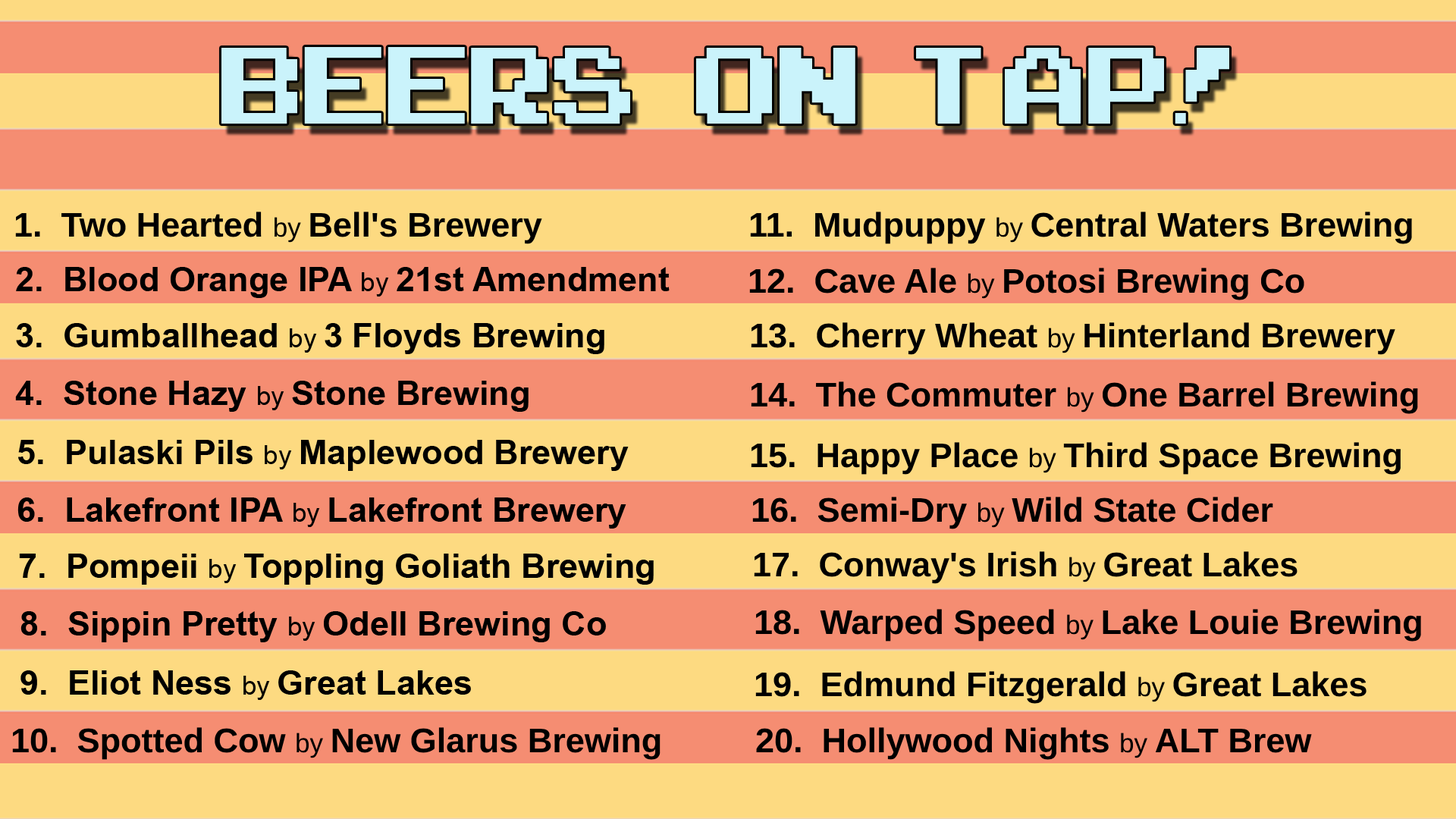
<style>
.page{position:relative;width:1456px;height:819px;background:#fdda81}
.page>*{position:absolute;margin:0}
.t1{font:34.1px "Arial-BoldMT";color:#000000}
.t2{font:26.5px "ArialMT";color:#000000}
</style>
<div class="page">
<p class="t1" style="left:15px;top:212px;width:527px;height:32px">1.  Two Hearted <span class="t2">by </span>Bell's Brewery</p>
<p class="t1" style="left:750px;top:212px;width:662px;height:32px">11.  Mudpuppy <span class="t2">by </span>Central Waters Brewing</p>
<p class="t1" style="left:16px;top:267px;width:654px;height:31px">2.  Blood Orange IPA <span class="t2">by </span>21st Amendment</p>
<p class="t1" style="left:749px;top:268px;width:555px;height:32px">12.  Cave Ale <span class="t2">by </span>Potosi Brewing Co</p>
<p class="t1" style="left:16px;top:323px;width:588px;height:31px">3.  Gumballhead <span class="t2">by </span>3 Floyds Brewing</p>
<p class="t1" style="left:751px;top:322px;width:644px;height:33px">13.  Cherry Wheat <span class="t2">by </span>Hinterland Brewery</p>
<p class="t1" style="left:15px;top:381px;width:514px;height:31px">4.  Stone Hazy <span class="t2">by </span>Stone Brewing</p>
<p class="t1" style="left:751px;top:381px;width:667px;height:33px">14.  The Commuter <span class="t2">by </span>One Barrel Brewing</p>
<p class="t1" style="left:18px;top:440px;width:611px;height:31px">5.  Pulaski Pils <span class="t2">by </span>Maplewood Brewery</p>
<p class="t1" style="left:751px;top:442px;width:650px;height:33px">15.  Happy Place <span class="t2">by </span>Third Space Brewing</p>
<p class="t1" style="left:17px;top:497px;width:609px;height:32px">6.  Lakefront IPA <span class="t2">by </span>Lakefront Brewery</p>
<p class="t1" style="left:752px;top:497px;width:521px;height:32px">16.  Semi-Dry <span class="t2">by </span>Wild State Cider</p>
<p class="t1" style="left:19px;top:554px;width:635px;height:31px">7.  Pompeii <span class="t2">by </span>Toppling Goliath Brewing</p>
<p class="t1" style="left:754px;top:551px;width:543px;height:33px">17.  Conway's Irish <span class="t2">by </span>Great Lakes</p>
<p class="t1" style="left:20px;top:611px;width:586px;height:31px">8.  Sippin Pretty <span class="t2">by </span>Odell Brewing Co</p>
<p class="t1" style="left:755px;top:609px;width:666px;height:33px">18.  Warped Speed <span class="t2">by </span>Lake Louie Brewing</p>
<p class="t1" style="left:20px;top:670px;width:451px;height:30px">9.  Eliot Ness <span class="t2">by </span>Great Lakes</p>
<p class="t1" style="left:755px;top:671px;width:611px;height:33px">19.  Edmund Fitzgerald <span class="t2">by </span>Great Lakes</p>
<p class="t1" style="left:12px;top:727px;width:648px;height:33px">10.  Spotted Cow <span class="t2">by </span>New Glarus Brewing</p>
<p class="t1" style="left:756px;top:727px;width:556px;height:33px">20.  Hollywood Nights <span class="t2">by </span>ALT Brew</p>
</div>
